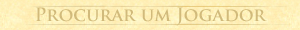
<style>
.page{position:relative;width:300px;height:30px}
.page>*{position:absolute;margin:0}
.t1{font:18px "TrajanPro-Bold";color:#d1ba7b}
</style>
<div class="page">
<p class="t1" style="left:35px;top:7px;width:232px;height:19px">Procurar um Jogador</p>
</div>
